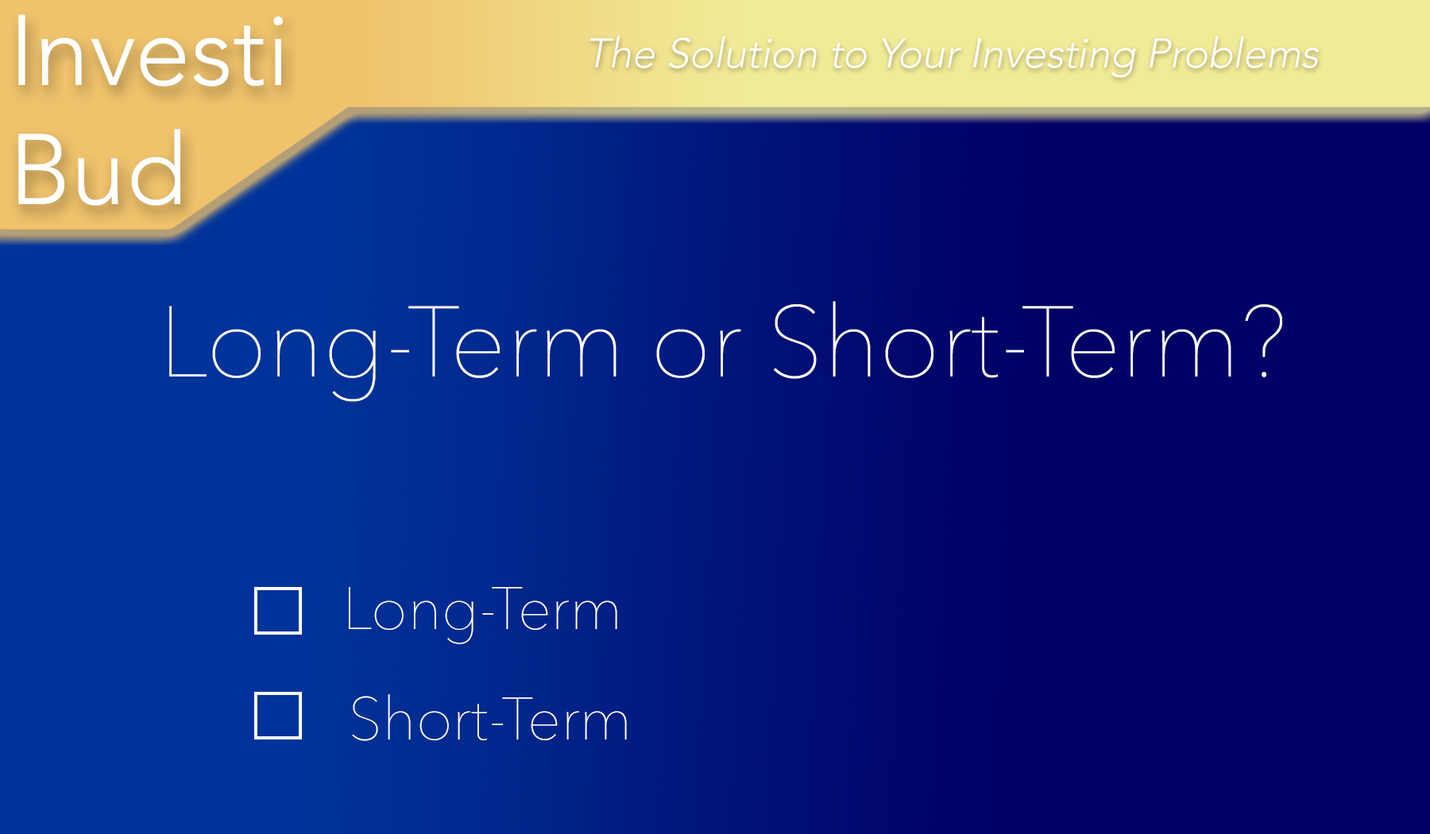
<style>
.page{position:relative;width:1430px;height:834px;background:#000066}
.page>*{position:absolute;margin:0}
.t1{font:99.3px "Avenir-Light";color:#ffffff}
.t2{font:41.4px "Avenir-Light";color:#ffffff;font-style:italic}
.t3{font:99.3px "AvenirNext-UltraLight";color:#ffffff}
.t4{font:59.6px "AvenirNext-UltraLight";color:#ffffff}
</style>
<div class="page">
<p class="t1" style="left:18px;top:14px;width:265px;height:192px">Investi<br>Bud</p>
<p class="t2" style="left:589px;top:36px;width:730px;height:42px">The Solution to Your Investing Problems</p>
<p class="t3" style="left:169px;top:301px;width:1113px;height:101px">Long-Term or Short-Term?</p>
<p class="t4" style="left:349px;top:587px;width:268px;height:57px">Long-Term</p>
<p class="t4" style="left:352px;top:694px;width:275px;height:47px">Short-Term</p>
</div>
